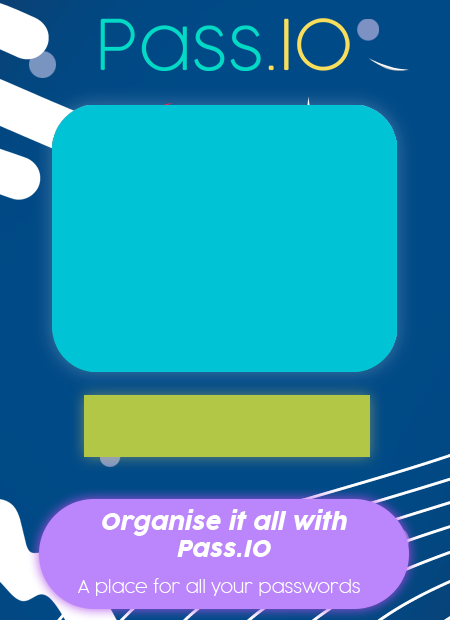
<style>
.page{position:relative;width:450px;height:620px;background:#00c4d6}
.page>*{position:absolute;margin:0}
.t1{font:23px "CocogoosePro-Italic";color:#ffffff}
.t2{font:16.7px "COCOGOOSE-UltraLight";color:#ffffff}
</style>
<div class="page">
<p class="t1" style="left:102px;top:509px;width:245px;height:48px;text-align:center">Organise it all with Pass.IO</p>
<p class="t2" style="left:78px;top:578px;width:282px;height:18px">A place for all your passwords</p>
</div>
